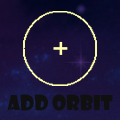
<style>
.page{position:relative;width:120px;height:120px}
.page>*{position:absolute;margin:0}
.t1{font:20px "ShowcardGothic-Reg";color:#101010}
</style>
<div class="page">
<p class="t1" style="left:7px;top:94px;width:106px;height:17px">ADD ORBIT</p>
</div>
